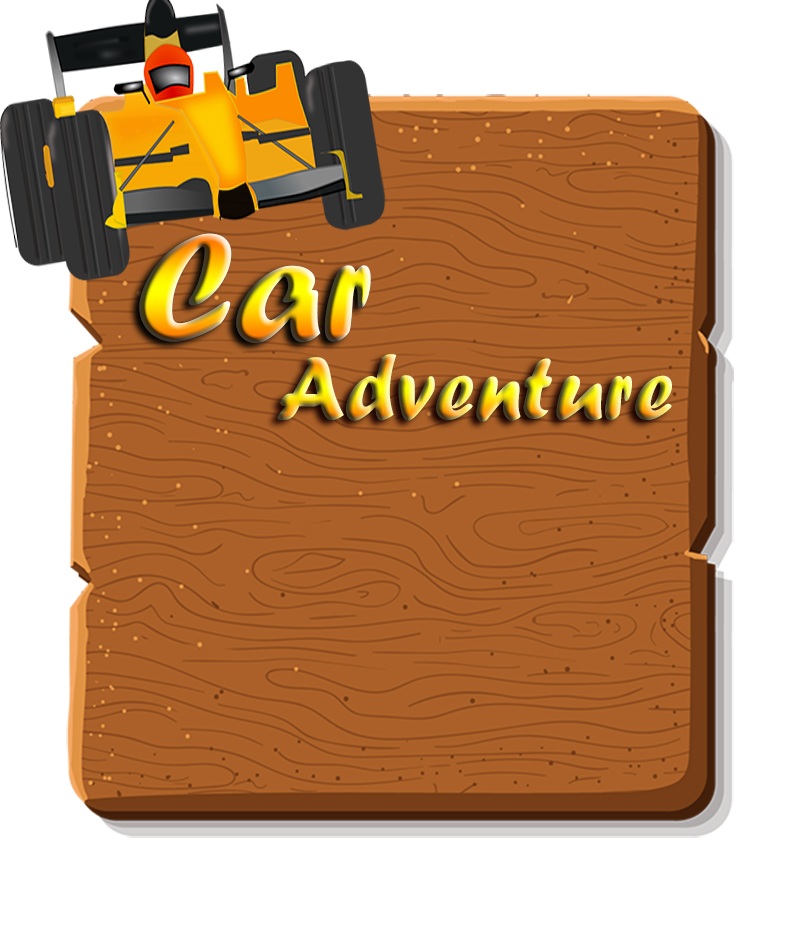
<style>
.page{position:relative;width:800px;height:933px;background:#ffffff}
.page>*{position:absolute;margin:0}
.t1{font:160px "ForteMT"}
.t2{font:93.3px "ForteMT"}
</style>
<div class="page">
<p class="t1" style="left:139px;top:233px;width:232px;height:111px">Car</p>
<p class="t2" style="left:277px;top:354px;width:395px;height:68px">Adventure</p>
</div>
